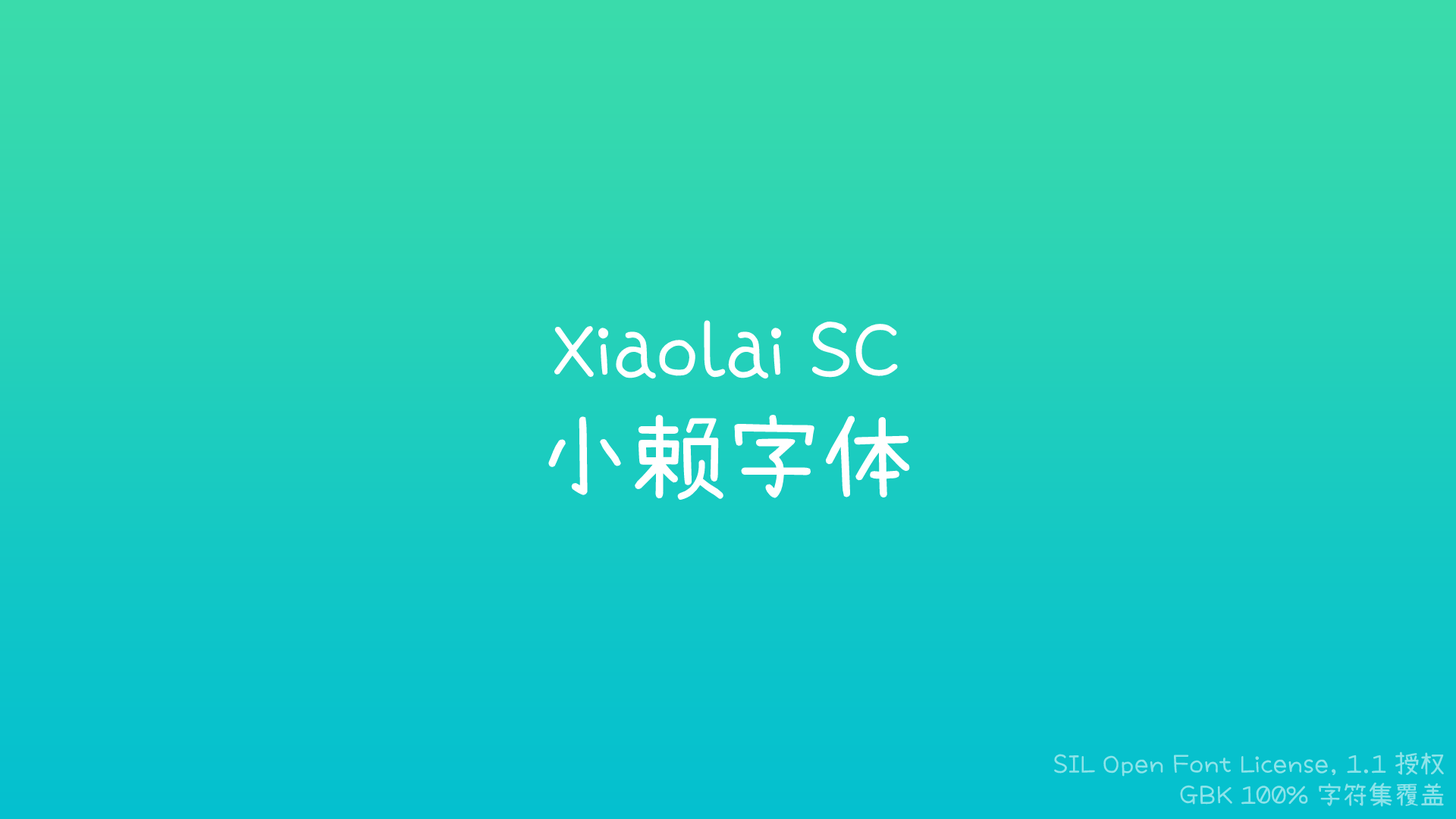
<style>
.page{position:relative;width:1456px;height:819px}
.page>*{position:absolute;margin:0}
.t1{font:75.8px "XiaolaiSC";color:#ffffff}
.t2{font:94.8px "XiaolaiSC";color:#ffffff}
.t3{font:25.8px "XiaolaiSC";color:#8ce3e9}
</style>
<div class="page">
<p class="t1" style="left:548px;top:320px;width:362px;height:180px;text-align:center">Xiaolai SC<br><span class="t2">小赖字体</span></p>
<p class="t3" style="left:1054px;top:751px;width:390px;height:56px;text-align:right">SIL Open Font License, 1.1 授权<br> GBK 100% 字符集覆盖</p>
</div>
